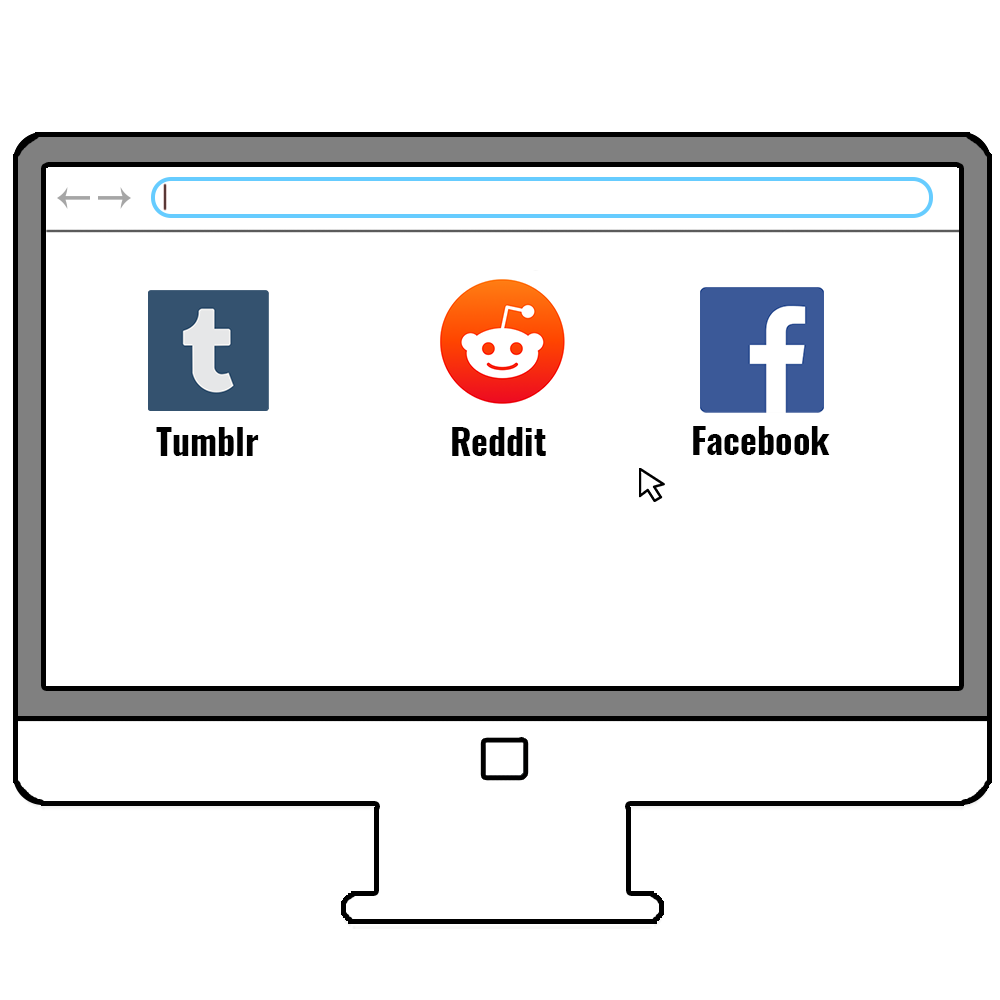
<style>
.page{position:relative;width:1000px;height:1000px;background:#ffffff}
.page>*{position:absolute;margin:0}
.t1{font:36px "Oswald-Bold";color:#000000}
</style>
<div class="page">
<p class="t1" style="left:156px;top:427px;width:103px;height:29px">Tumblr</p>
<p class="t1" style="left:452px;top:427px;width:94px;height:29px">Reddit</p>
<p class="t1" style="left:693px;top:426px;width:137px;height:29px">Facebook</p>
</div>
